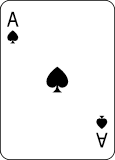
<style>
.page{position:relative;width:115px;height:160px;background:#ffffff}
.page>*{position:absolute;margin:0}
.t1{font:123.1px "cards";letter-spacing:0.05em}
</style>
<div class="page">
<p class="t1" style="left:0px;top:5px;width:114px;height:149px">a</p>
</div>
